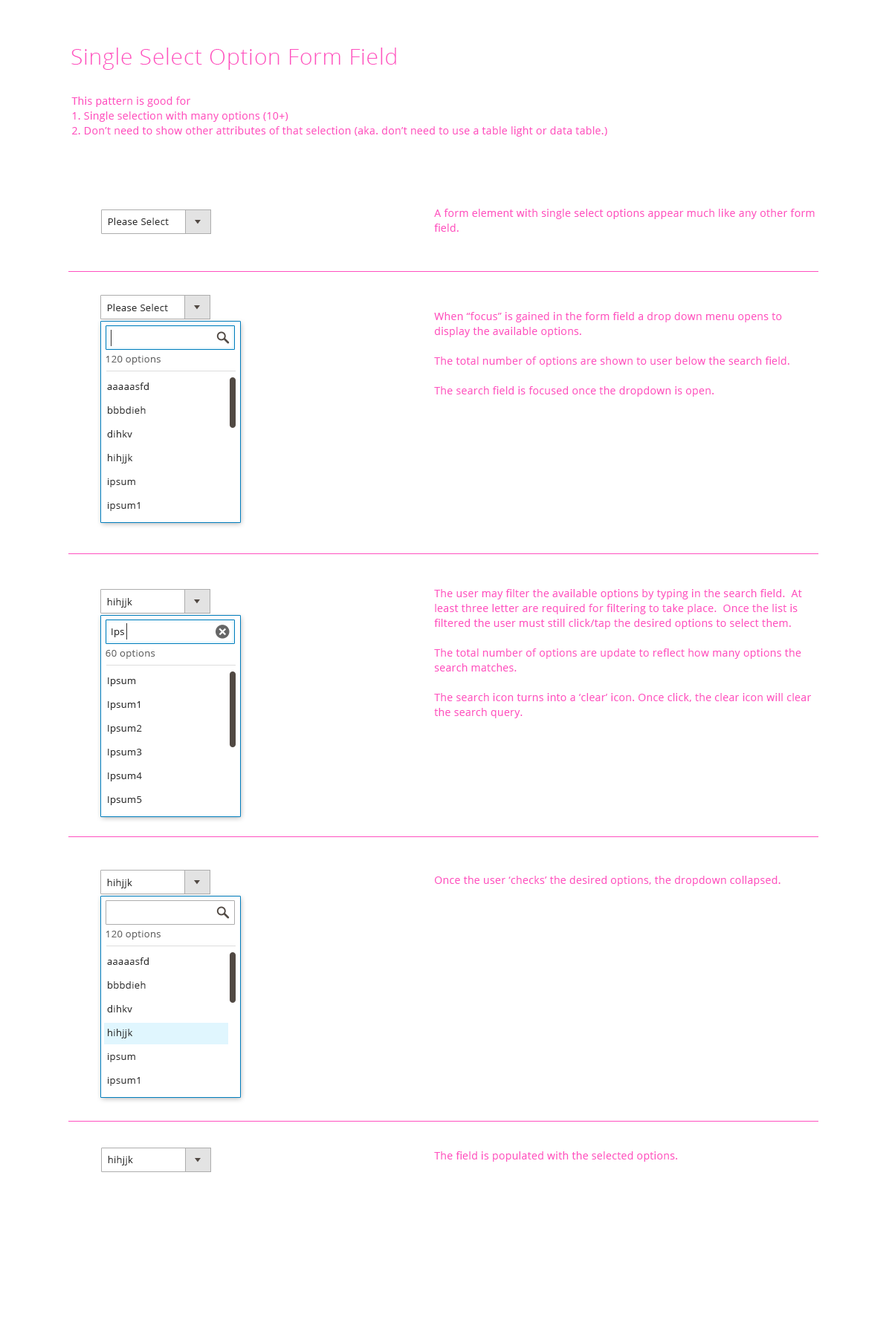
<style>
.page{position:relative;width:892px;height:1337px;background:#ffffff}
.page>*{position:absolute;margin:0}
.t1{font:22.3px "OpenSans-Light";letter-spacing:0.025em;color:#ff51c0}
.t2{font:10.4px/14.9px "OpenSans";letter-spacing:0.025em;color:#ff51c0}
.t3{font:9.7px "OpenSans";letter-spacing:0.025em;color:#303030}
.t4{font:9.7px "OpenSans";letter-spacing:0.025em;color:#666666}
.t5{font:9.7px/23.8px "OpenSans";letter-spacing:0.025em;color:#303030}
.t6{font:10.4px "OpenSans";letter-spacing:0.025em;color:#ff51c0}
</style>
<div class="page">
<p class="t1" style="left:71px;top:48px;width:325px;height:22px">Single Select Option Form Field</p>
<p class="t2" style="left:71px;top:97px;width:536px;height:40px">This pattern is good for <br>1. Single selection with many options (10+)<br>2. Don’t need to show other attributes of that selection (aka. don’t need to use a table light or data table.)</p>
<p class="t2" style="left:434px;top:209px;width:380px;height:23px">A form element with single select options appear much like any other form field.</p>
<p class="t3" style="left:108px;top:218px;width:61px;height:7px">Please Select</p>
<p class="t3" style="left:107px;top:304px;width:61px;height:7px">Please Select</p>
<p class="t2" style="left:434px;top:312px;width:355px;height:85px">When “focus” is gained in the form field a drop down menu opens to <br>display the available options. <br><br>The total number of options are shown to user below the search field.<br><br>The search field is focused once the dropdown is open.</p>
<p class="t4" style="left:106px;top:356px;width:54px;height:9px">120 options</p>
<p class="t5" style="left:107px;top:383px;width:42px;height:128px">aaaaasfd<br>bbbdieh<br>dihkv<br>hihjjk<br>ipsum<br>ipsum1</p>
<p class="t2" style="left:434px;top:589px;width:377px;height:129px">The user may filter the available options by typing in the search field.  At least three letter are required for filtering to take place.  Once the list is filtered the user must still click/tap the desired options to select them.<br><br>The total number of options are update to reflect how many options the <br>search matches.<br><br>The search icon turns into a ‘clear’ icon. Once click, the clear icon will clear<br>the search query.</p>
<p class="t3" style="left:107px;top:598px;width:25px;height:10px">hihjjk</p>
<p class="t3" style="left:111px;top:629px;width:13px;height:8px">Ips</p>
<p class="t4" style="left:106px;top:650px;width:49px;height:9px">60 options</p>
<p class="t5" style="left:108px;top:678px;width:34px;height:127px">Ipsum<br>Ipsum1<br>Ipsum2<br>Ipsum3<br>Ipsum4<br>Ipsum5</p>
<p class="t3" style="left:107px;top:879px;width:25px;height:10px">hihjjk</p>
<p class="t6" style="left:435px;top:876px;width:345px;height:10px">Once the user ‘checks’ the desired options, the dropdown collapsed.</p>
<p class="t4" style="left:106px;top:931px;width:54px;height:9px">120 options</p>
<p class="t5" style="left:107px;top:958px;width:42px;height:128px">aaaaasfd<br>bbbdieh<br>dihkv<br>hihjjk<br>ipsum<br>ipsum1</p>
<p class="t3" style="left:108px;top:1156px;width:25px;height:10px">hihjjk</p>
<p class="t6" style="left:434px;top:1152px;width:243px;height:10px">The field is populated with the selected options.</p>
</div>
